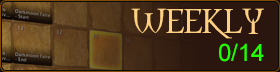
<style>
.page{position:relative;width:280px;height:72px;background:#2a160e}
.page>*{position:absolute;margin:0}
.t1{font:32px "Morpheus";color:#fed082}
.t2{font:24px "ArialMT";color:#1eff00}
</style>
<div class="page">
<p class="t1" style="left:131px;top:8px;width:133px;height:31px">WEEKLY</p>
<p class="t2" style="left:219px;top:43px;width:45px;height:19px">0/14</p>
</div>
